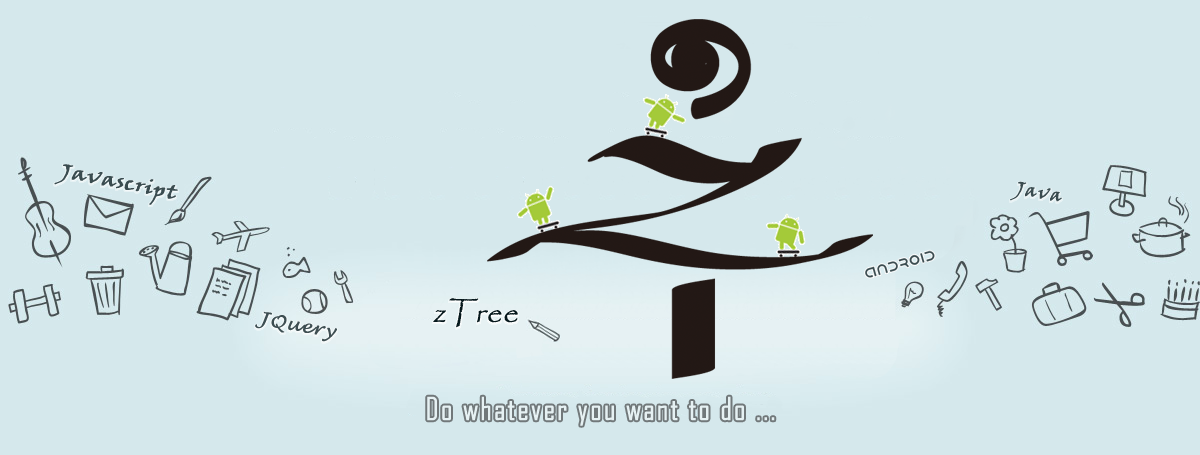
<style>
.page{position:relative;width:1200px;height:455px;background:#d5e8ec}
.page>*{position:absolute;margin:0}
.t1{font:19.4px "VinerHandITC";color:#3a4c50;font-weight:bold;scale:1.19 1}
.t2{font:18px "VinerHandITC";letter-spacing:0.05em;color:#3a4c50;font-weight:bold}
.t3{font:30px "Papyrus-Regular";color:#06181c;font-weight:bold;font-style:italic}
.t4{font:18px "LucidaHandwriting-Italic";letter-spacing:0.05em;color:#3e4e52;font-weight:bold}
</style>
<div class="page">
<p class="t1" style="left:54px;top:164px;width:124px;height:41px;rotate:11deg">Javascript</p>
<p class="t2" style="left:1010px;top:181px;width:52px;height:21px;rotate:11deg">Java</p>
<p class="t3" style="left:433px;top:298px;width:85px;height:30px">zTree</p>
<p class="t4" style="left:255px;top:311px;width:82px;height:31px;rotate:10deg">JQuery</p>
</div>
